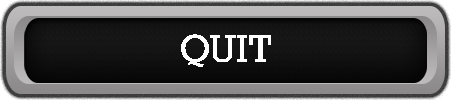
<style>
.page{position:relative;width:451px;height:100px}
.page>*{position:absolute;margin:0}
.t1{font:39.8px "Rockwell";color:#ffffff}
</style>
<div class="page">
<p class="t1" style="left:181px;top:34px;width:90px;height:33px">QUIT</p>
</div>
